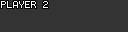
<style>
.page{position:relative;width:128px;height:32px;background:#333333}
.page>*{position:absolute;margin:0}
.t1{font:8px "Terminal";color:#fbfbfb}
</style>
<div class="page">
<p class="t1" style="left:1px;top:1px;width:47px;height:7px">PLAYER 2</p>
</div>
